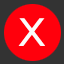
<style>
.page{position:relative;width:64px;height:64px;background:#ff000c}
.page>*{position:absolute;margin:0}
.t1{font:40.1px "LiberationSansNarrow";letter-spacing:0.025em;color:#fafafa;scale:1.26 1}
</style>
<div class="page">
<p class="t1" style="left:18px;top:18px;width:27px;height:28px">X</p>
</div>
